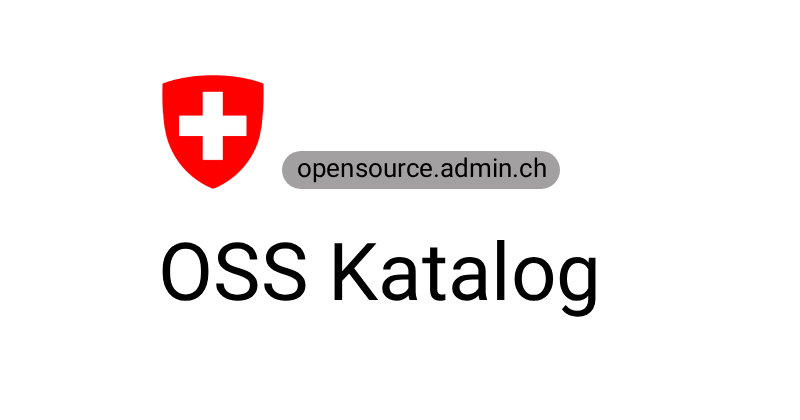
<style>
.page{position:relative;width:800px;height:420px;background:#ffffff}
.page>*{position:absolute;margin:0}
.t1{font:80px "Roboto-Regular";color:#000000}
</style>
<div class="page">
<p class="t1" style="left:162px;top:240px;width:434px;height:77px">OSS Katalog</p>
</div>
